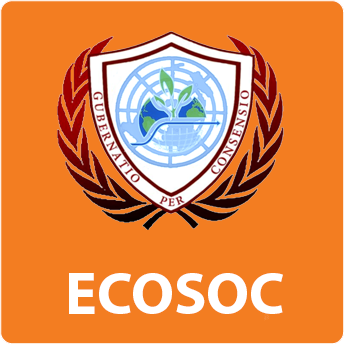
<style>
.page{position:relative;width:345px;height:345px;background:#f37d21}
.page>*{position:absolute;margin:0}
.t1{font:60px "MyriadPro-Bold";color:#ffffff}
</style>
<div class="page">
<p class="t1" style="left:69px;top:273px;width:214px;height:41px">ECOSOC</p>
</div>
